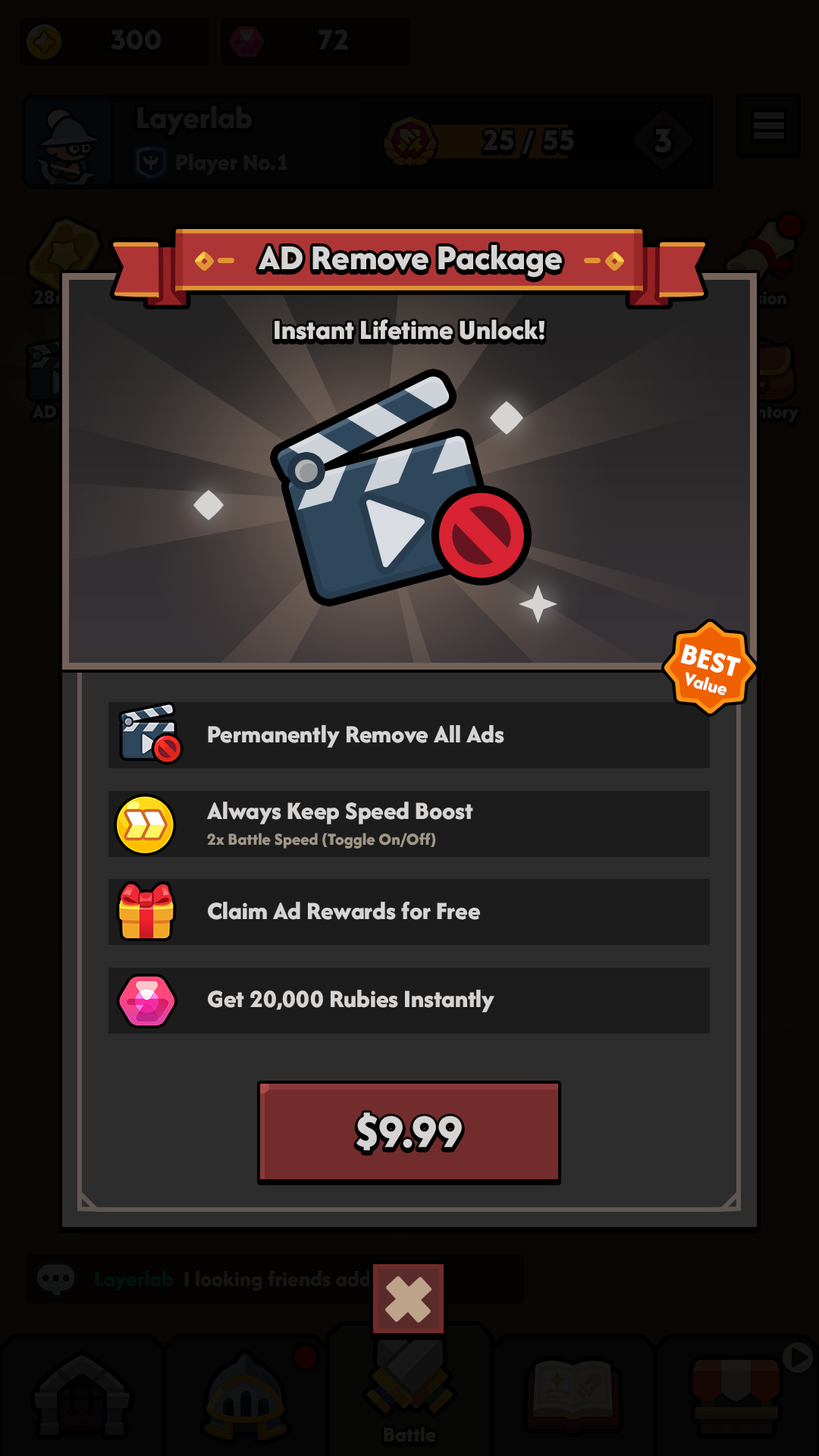
<style>
.page{position:relative;width:819px;height:1456px;background:#090604}
.page>*{position:absolute;margin:0}
.t1{font:36.4px "AfacadFlux-ExtraBold";color:#d6d4d3}
.t2{font:28.8px "AfacadFlux-ExtraBold";color:#d6d4d3}
.t3{font:30.3px "AfacadFlux-ExtraBold";color:#ffffff;text-transform:uppercase}
.t4{font:19.7px "AfacadFlux-ExtraBold";color:#ffffff}
.t5{font:25.8px "AfacadFlux-ExtraBold";color:#d6d4d3}
.t6{font:17.5px "AfacadFlux-ExtraBold";color:#9f9787}
.t7{font:45.5px "LTAvocado-Bold";color:#d6d4d3}
</style>
<div class="page">
<p class="t1" style="left:259px;top:245px;width:303px;height:33px">AD Remove Package</p>
<p class="t2" style="left:275px;top:319px;width:269px;height:21px">Instant Lifetime Unlock!</p>
<p class="t3" style="left:680px;top:644px;width:61px;height:32px;rotate:15deg">Best</p>
<p class="t4" style="left:686px;top:672px;width:40px;height:23px;rotate:15deg">Value</p>
<p class="t5" style="left:208px;top:725px;width:296px;height:23px">Permanently Remove All Ads</p>
<p class="t5" style="left:207px;top:802px;width:266px;height:22px">Always Keep Speed Boost</p>
<p class="t6" style="left:207px;top:833px;width:229px;height:16px">2x Battle Speed (Toggle On/Off)</p>
<p class="t5" style="left:208px;top:902px;width:272px;height:18px">Claim Ad Rewards for Free</p>
<p class="t5" style="left:208px;top:990px;width:286px;height:22px">Get 20,000 Rubies Instantly</p>
<p class="t7" style="left:356px;top:1112px;width:106px;height:38px">$9.99</p>
</div>
